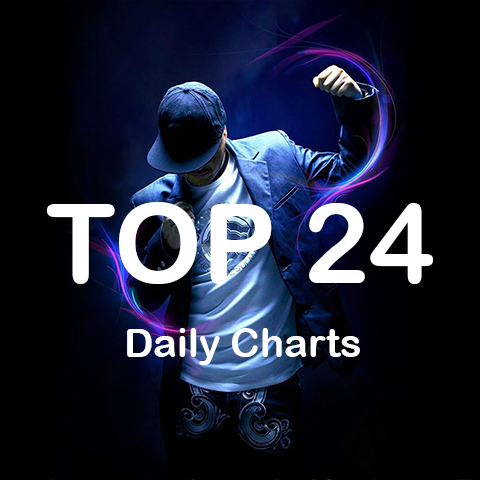
<style>
.page{position:relative;width:480px;height:480px;background:#000002}
.page>*{position:absolute;margin:0}
.t1{font:111px "ArialRoundedMTBold";color:#ffffff;text-transform:uppercase}
.t2{font:40px "ArialRoundedMTBold";color:#ffffff}
</style>
<div class="page">
<p class="t1" style="left:46px;top:202px;width:387px;height:82px">TOP 24</p>
<p class="t2" style="left:127px;top:328px;width:233px;height:37px">Daily Charts</p>
</div>
